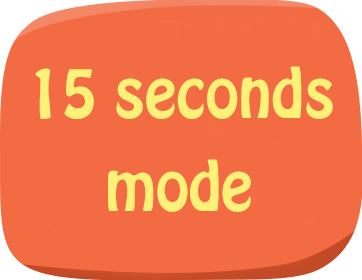
<style>
.page{position:relative;width:362px;height:280px;background:#f36b43}
.page>*{position:absolute;margin:0}
.t1{font:60px "HoboStd";color:#fff077}
</style>
<div class="page">
<p class="t1" style="left:35px;top:66px;width:298px;height:53px">15 seconds</p>
<p class="t1" style="left:108px;top:159px;width:143px;height:53px">mode</p>
</div>
